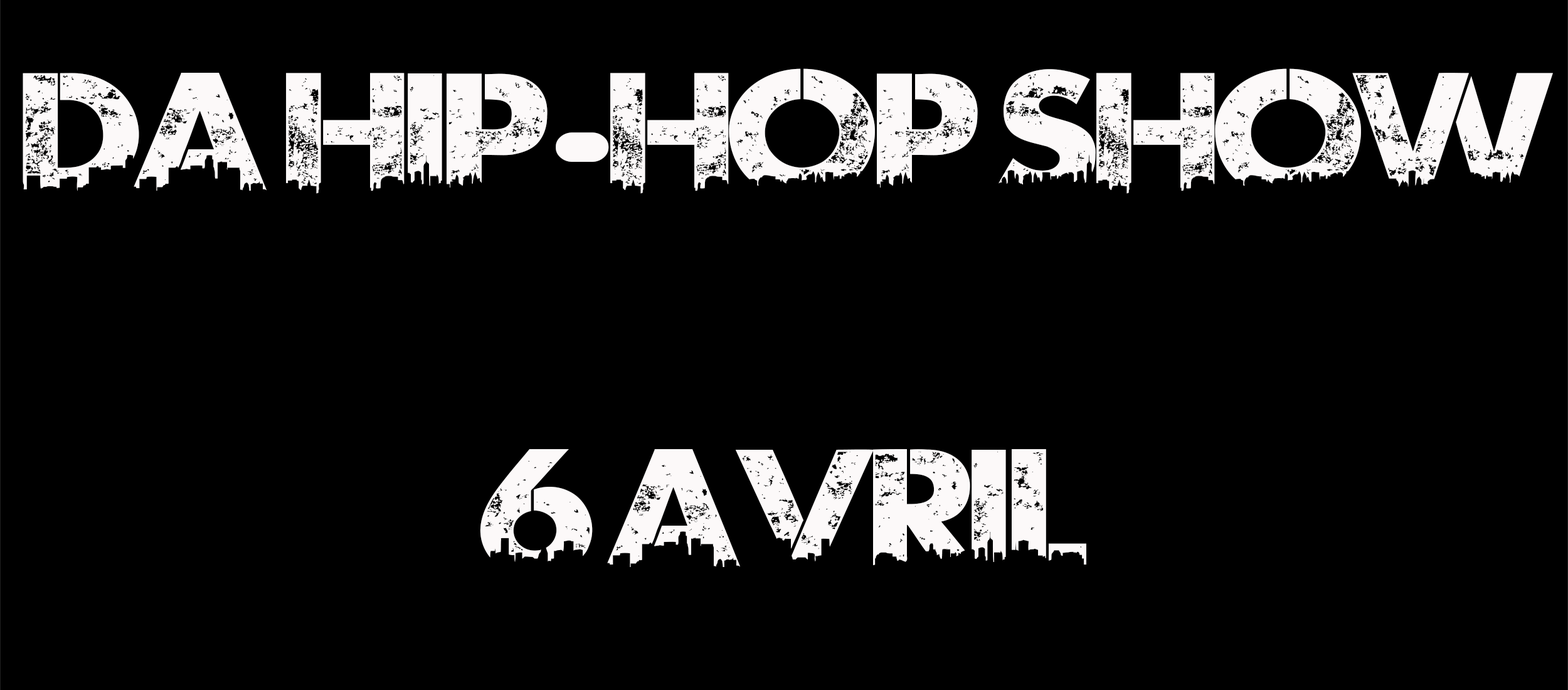
<style>
.page{position:relative;width:1568px;height:690px;background:#000000}
.page>*{position:absolute;margin:0}
.t1{font:156.8px "UrbanJungleDEMO";color:#fcf9f9;scale:1.19 1}
.t2{font:156.8px "Billo";color:#fcf9f9;scale:1.19 1}
</style>
<div class="page">
<p class="t1" style="left:23px;top:68px;width:1530px;height:499px;text-align:center">DA HIP<span class="t2">-</span>HOP SHOW<br><br>6 AVRIL</p>
</div>
